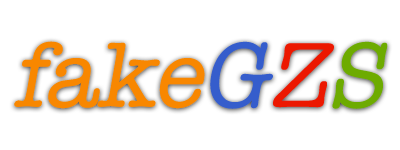
<style>
.page{position:relative;width:400px;height:150px;background:#ffffff}
.page>*{position:absolute;margin:0}
.t1{font:93.6px "AmericanTypewriter";color:#f88700;font-style:italic}
.t2{font:93.6px "AmericanTypewriter";color:#355dcc;font-style:italic}
.t3{font:93.6px "AmericanTypewriter";color:#ec1800;font-style:italic}
.t4{font:93.6px "AmericanTypewriter";color:#6dab00;font-style:italic}
</style>
<div class="page">
<p class="t1" style="left:14px;top:41px;width:374px;height:68px">fake<span class="t2">G</span><span class="t3">Z</span><span class="t4">S</span></p>
</div>
